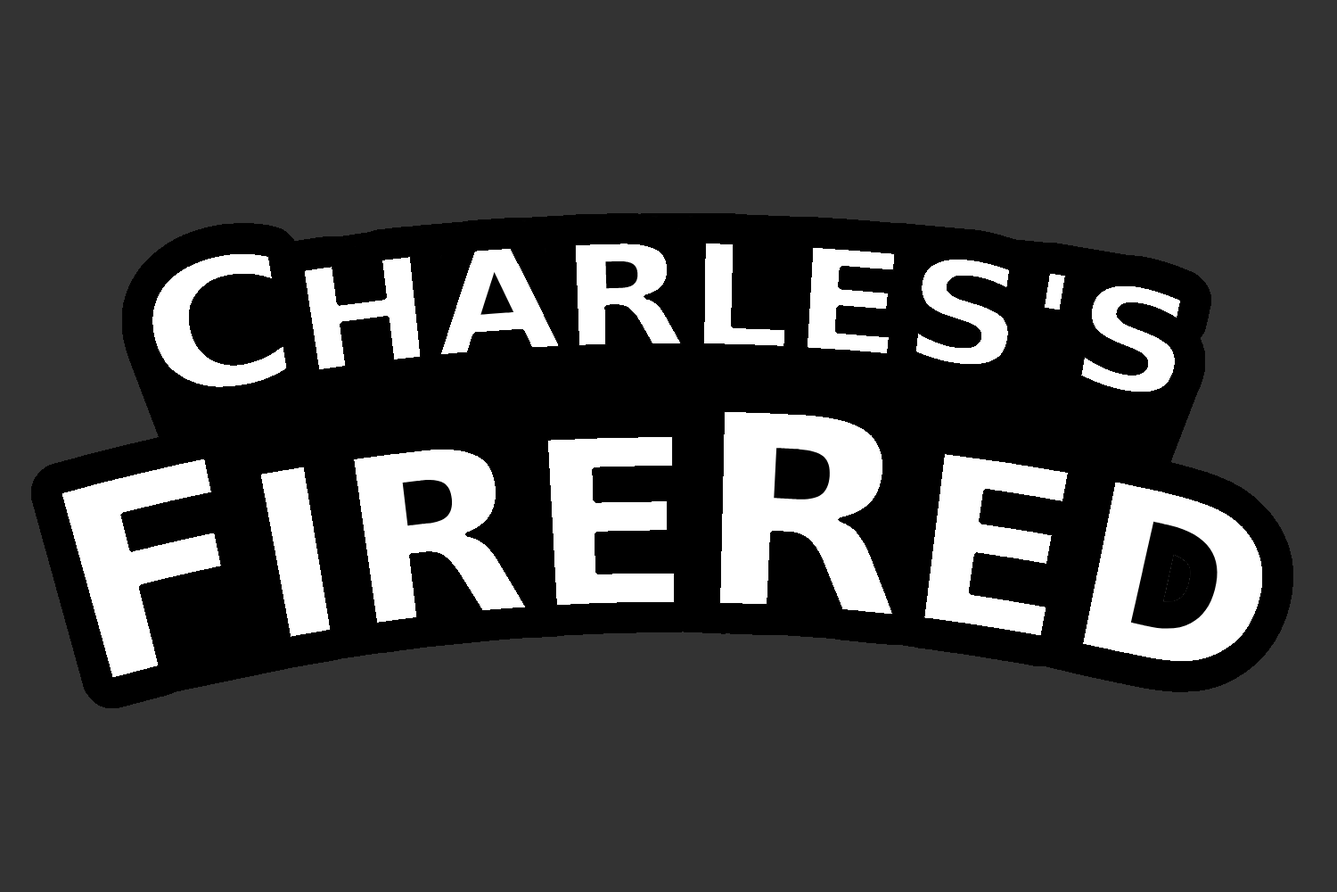
<style>
.page{position:relative;width:1337px;height:892px;background:#333333}
.page>*{position:absolute;margin:0}
.t1{font:142.7px "Futura-ExtraBold";color:#ffffff}
.t2{font:178.3px "Futura-ExtraBold";color:#ffffff}
.t3{font:267.5px "Futura-ExtraBold";color:#ffffff}
.t4{font:231.8px "Futura-ExtraBold";color:#ffffff}
</style>
<div class="page">
<p class="t1" style="left:59px;top:241px;width:1206px;height:439px;text-align:center"><span class="t2">C</span>HARLES'S<br><span class="t3">F</span><span class="t4">IRE</span><span class="t3">R</span><span class="t4">ED</span></p>
</div>
